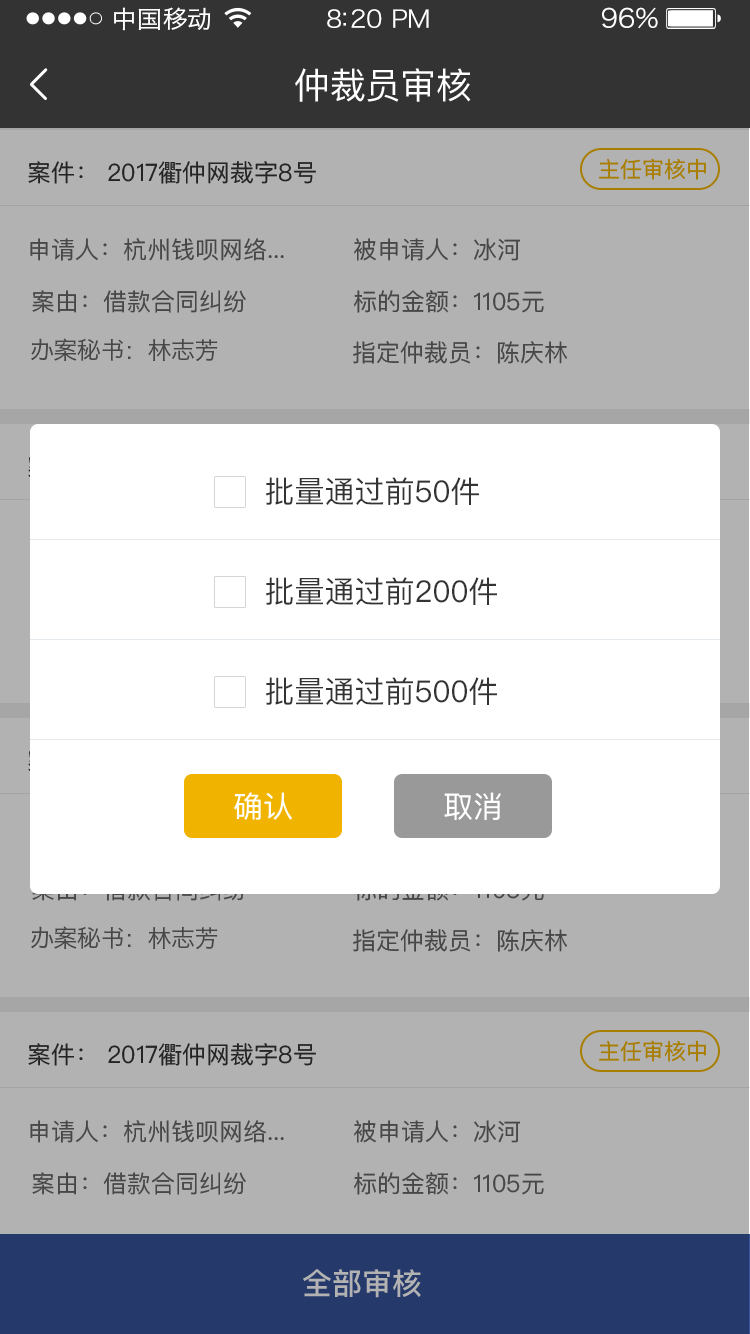
<style>
.page{position:relative;width:750px;height:1334px;background:#b2b2b2}
.page>*{position:absolute;margin:0}
.t1{font:24px "HiraginoSansGB-W3";letter-spacing:0.02em;color:#ffffff;scale:1.03 1}
.t2{font:24px "HiraginoSansGB-W3";letter-spacing:-0.02em;color:#ffffff;scale:1.03 1}
.t3{font:26.2px "HiraginoSansGB-W3";letter-spacing:-0.02em;color:#ffffff;scale:1.03 1}
.t4{font:36px "PingFangSC-Regular";letter-spacing:-0.02em;color:#ffffff}
.t5{font:24px "PingFangSC-Regular";color:#333333}
.t6{font:22px "PingFangSC-Regular";color:#a87d00}
.t7{font:24px "PingFangSC-Regular";color:#474747}
.t8{font:24px "HiraginoSansGB-W3";letter-spacing:-0.02em;color:#474747}
.t9{font:30px "PingFang-SC-Medium";color:#333333}
.t10{font:30px "PingFangSC-Regular";color:#ffffff}
.t11{font:30px "PingFangSC-Medium";color:#b2b2b2}
</style>
<div class="page">
<p class="t1" style="left:114px;top:7px;width:97px;height:24px">中国移动</p>
<p class="t2" style="left:327px;top:9px;width:102px;height:19px">8:20 PM</p>
<p class="t3" style="left:602px;top:7px;width:56px;height:22px">96%</p>
<p class="t4" style="left:295px;top:68px;width:176px;height:34px">仲裁员审核</p>
<p class="t5" style="left:28px;top:161px;width:288px;height:23px">案件： 2017衢仲网裁字8号</p>
<p class="t6" style="left:599px;top:158px;width:107px;height:22px">主任审核中</p>
<p class="t7" style="left:30px;top:238px;width:254px;height:23px">申请人：杭州钱呗网络...</p>
<p class="t7" style="left:354px;top:238px;width:166px;height:23px">被申请人：冰河</p>
<p class="t7" style="left:32px;top:290px;width:214px;height:23px">案由：借款合同纠纷</p>
<p class="t7" style="left:354px;top:290px;width:190px;height:23px">标的金额：1105元</p>
<p class="t8" style="left:31px;top:338px;width:187px;height:24px">办案秘书：林志芳</p>
<p class="t7" style="left:353px;top:341px;width:214px;height:23px">指定仲裁员：陈庆林</p>
<p class="t9" style="left:266px;top:477px;width:213px;height:28px">批量通过前50件</p>
<p class="t9" style="left:266px;top:577px;width:231px;height:28px">批量通过前200件</p>
<p class="t9" style="left:266px;top:677px;width:231px;height:28px">批量通过前500件</p>
<p class="t10" style="left:234px;top:792px;width:58px;height:28px">确认</p>
<p class="t10" style="left:444px;top:792px;width:57px;height:29px">取消</p>
<p class="t8" style="left:31px;top:926px;width:187px;height:24px">办案秘书：林志芳</p>
<p class="t7" style="left:353px;top:929px;width:214px;height:23px">指定仲裁员：陈庆林</p>
<p class="t5" style="left:28px;top:1043px;width:288px;height:23px">案件： 2017衢仲网裁字8号</p>
<p class="t6" style="left:599px;top:1040px;width:107px;height:22px">主任审核中</p>
<p class="t7" style="left:30px;top:1120px;width:254px;height:23px">申请人：杭州钱呗网络...</p>
<p class="t7" style="left:354px;top:1120px;width:166px;height:23px">被申请人：冰河</p>
<p class="t7" style="left:32px;top:1172px;width:214px;height:23px">案由：借款合同纠纷</p>
<p class="t7" style="left:354px;top:1172px;width:190px;height:23px">标的金额：1105元</p>
<p class="t11" style="left:303px;top:1269px;width:118px;height:29px">全部审核</p>
</div>
